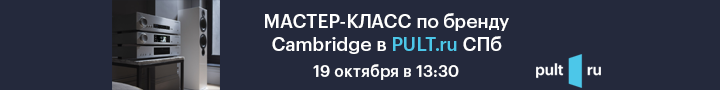
<style>
.page{position:relative;width:720px;height:90px;background:#24293c}
.page>*{position:absolute;margin:0}
.t1{font:18.7px "GraphikLCG-Medium";color:#ffffff}
.t2{font:18.7px "GraphikLCG-Medium";color:#4cc7e9}
.t3{font:16px "GraphikLCG-Medium";color:#ffffff}
</style>
<div class="page">
<p class="t1" style="left:265px;top:13px;width:244px;height:41px;text-align:center">МАСТЕР-КЛАСС по бренду <br>Cambridge в <span class="t2">PULT.ru</span> СПб</p>
<p class="t3" style="left:313px;top:64px;width:146px;height:16px">19 октября в 13:30</p>
</div>
